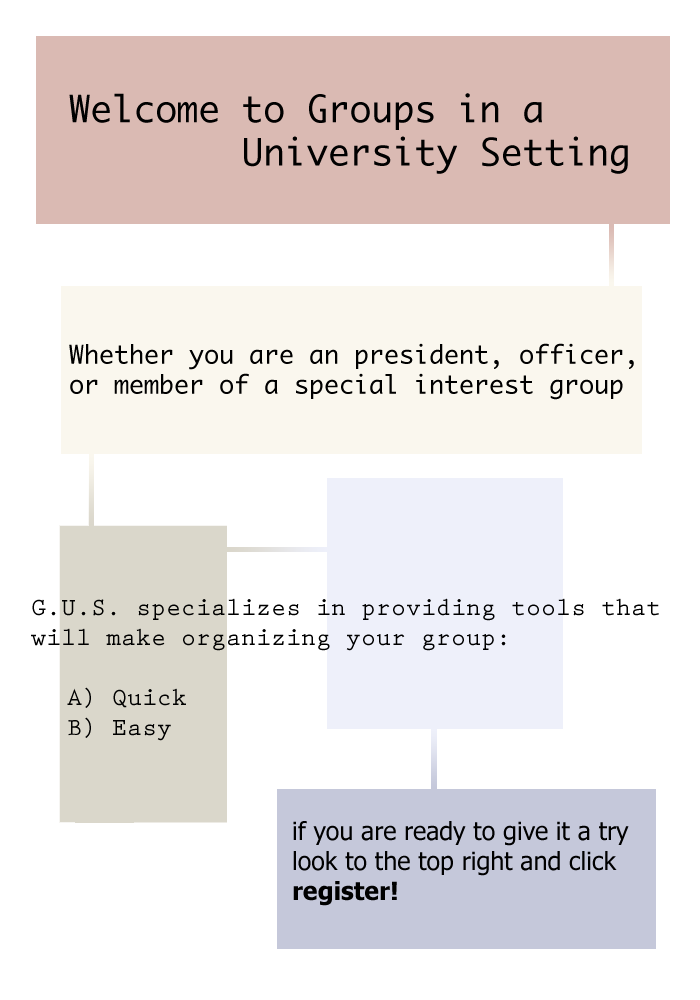
<style>
.page{position:relative;width:700px;height:1000px;background:#ffffff}
.page>*{position:absolute;margin:0}
.t1{font:36px "Monaco";color:#000000}
.t2{font:25px "Monaco";color:#000000}
.t3{font:25px "PrestigeEliteStd-Bd";color:#000000}
.t4{font:25px "Tahoma";color:#000000}
.t5{font:25px "Tahoma-Bold";color:#000000}
</style>
<div class="page">
<p class="t1" style="left:69px;top:93px;width:559px;height:81px">Welcome to Groups in a           University Setting</p>
<p class="t2" style="left:69px;top:343px;width:565px;height:57px">Whether you are an president, officer, <br>or member of a special interest group</p>
<p class="t3" style="left:31px;top:598px;width:628px;height:143px">G.U.S. specializes in providing tools that<br>will make organizing your group:<br><br> A) Quick<br> B) Easy</p>
<p class="t4" style="left:293px;top:821px;width:336px;height:85px">if you are ready to give it a try<br>look to the top right and click <br><span class="t5">register!</span></p>
</div>
